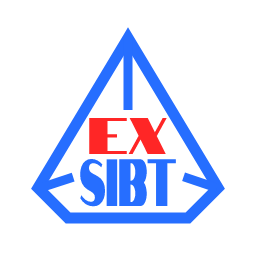
<style>
.page{position:relative;width:256px;height:256px;background:#ffffff}
.page>*{position:absolute;margin:0}
.t1{font:66.7px "Notable-Regular";color:#266eff;scale:0.48 1}
.t2{font:51.6px/20px "Notable-Regular";color:#ff2626}
</style>
<div class="page">
<p class="t1" style="left:80px;top:117px;width:96px;height:90px;text-align:center"><span class="t2">EX<br></span>SIBT</p>
</div>
